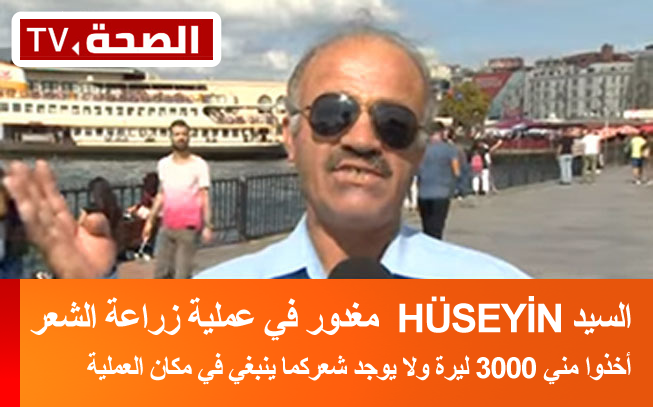
<style>
.page{position:relative;width:653px;height:407px}
.page>*{position:absolute;margin:0}
.t1{font:39.8px "Arial-BoldMT";letter-spacing:-0.04em;color:#ffffff}
.t2{font:29.6px "Arial-BoldMT";letter-spacing:-0.04em;color:#ffffff}
</style>
<div class="page">
<p class="t1" style="left:30px;top:296px;width:601px;height:45px">ﺮﻌﺸﻟﺍ ﺔﻋﺍﺭﺯ ﺔﻴﻠﻤﻋ ﻲﻓ ﺭﻭﺪﻐﻣ  HÜSEYİN ﺪﻴﺴﻟﺍ</p>
<p class="t2" style="left:87px;top:351px;width:544px;height:34px">ﺔﻴﻠﻤﻌﻟﺍ ﻥﺎﻜﻣ ﻲﻓ ﻲﻐﺒﻨﻳ ﺎﻤﻛﺮﻌﺷ ﺪﺟﻮﻳ ﻻﻭ ﺓﺮﻴﻟ 3000 ﻲﻨﻣ ﺍﻭﺬﺧﺃ</p>
</div>
